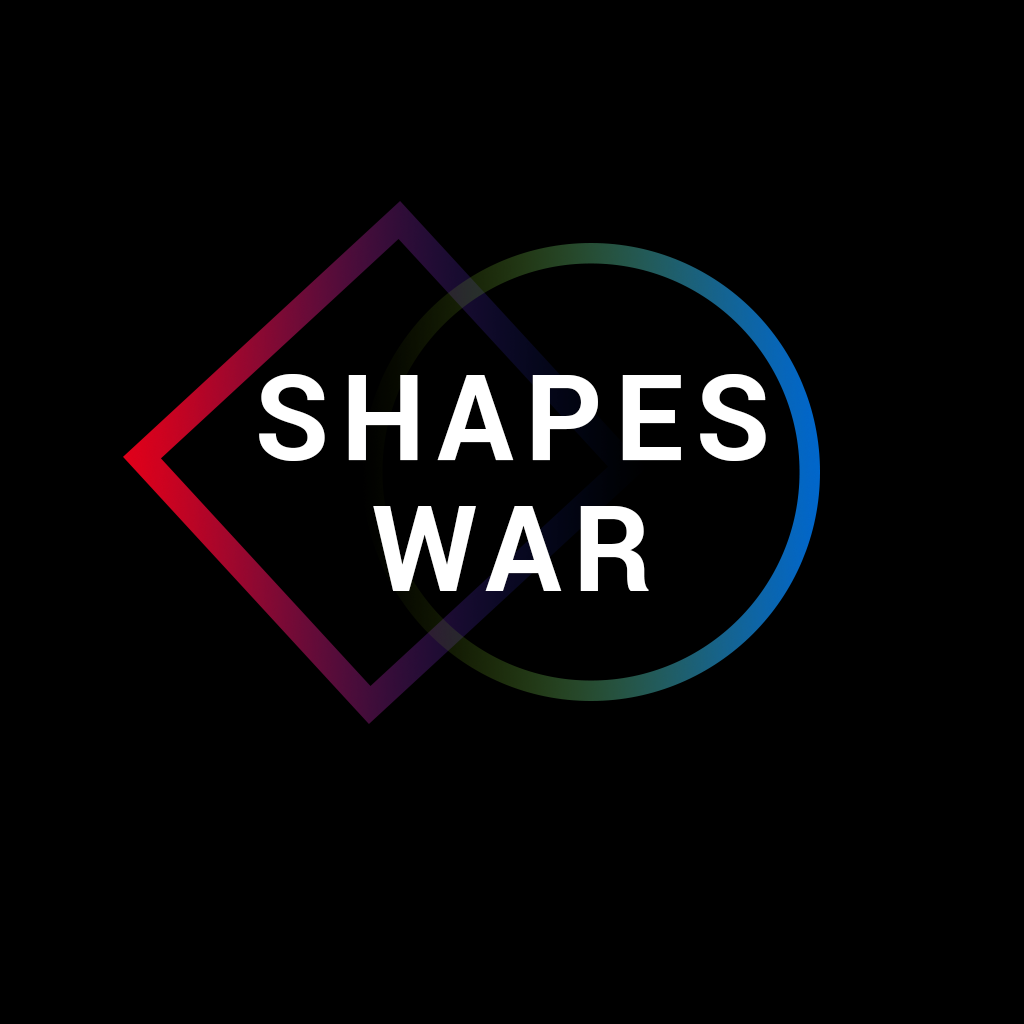
<style>
.page{position:relative;width:1024px;height:1024px;background:#000000}
.page>*{position:absolute;margin:0}
.t1{font:119px/131px "Roboto-Bold";letter-spacing:0.1em;color:#ffffff}
</style>
<div class="page">
<p class="t1" style="left:259px;top:374px;width:507px;height:217px;text-align:center">SHAPES WAR</p>
</div>
